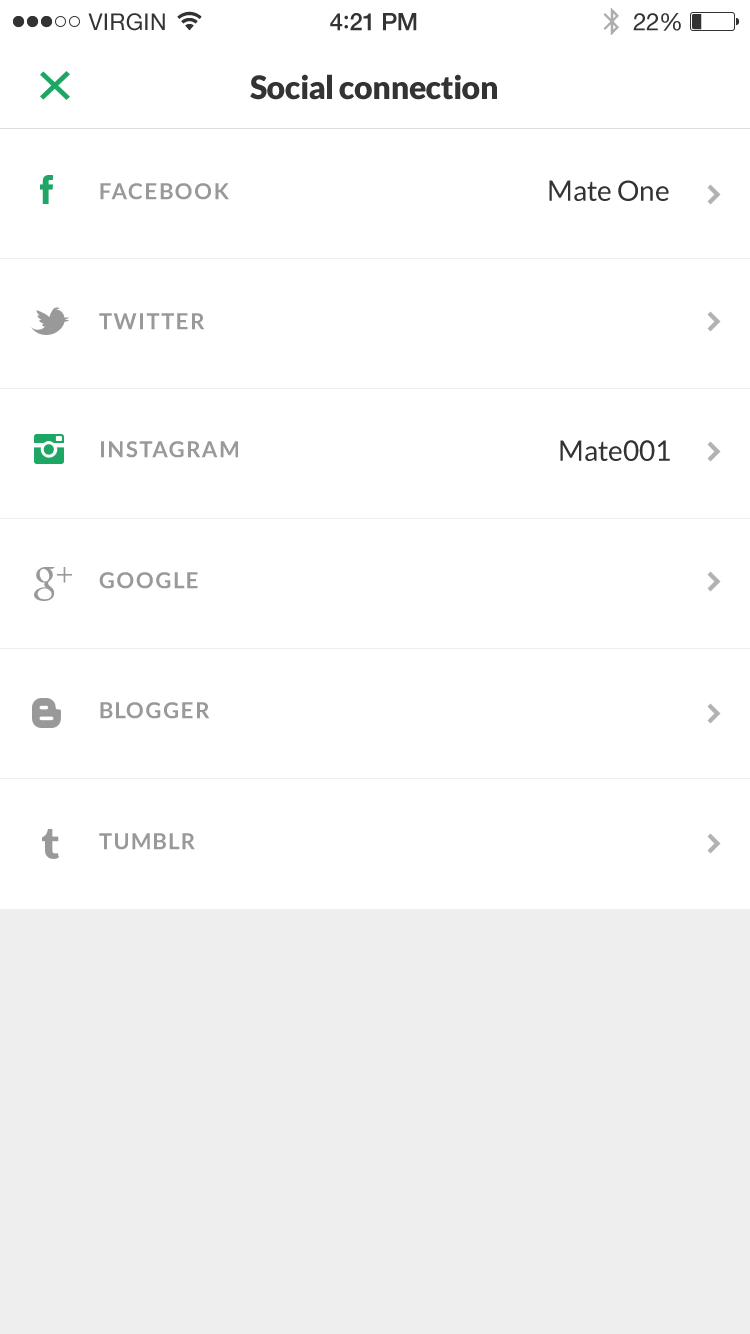
<style>
.page{position:relative;width:750px;height:1334px;background:#ffffff}
.page>*{position:absolute;margin:0}
.t1{font:32px "Lato-Black";letter-spacing:-0.02em;color:#333333}
.t2{font:22px "Lato-Bold";letter-spacing:0.07em;color:#999999}
.t3{font:28px "Lato-Regular";color:#333333}
</style>
<div class="page">
<p class="t1" style="left:250px;top:74px;width:247px;height:26px">Social connection</p>
<p class="t2" style="left:100px;top:183px;width:129px;height:17px">FACEBOOK</p>
<p class="t3" style="left:549px;top:180px;width:120px;height:21px">Mate One</p>
<p class="t2" style="left:99px;top:313px;width:106px;height:17px">TWITTER</p>
<p class="t2" style="left:101px;top:441px;width:137px;height:17px">INSTAGRAM</p>
<p class="t3" style="left:560px;top:440px;width:110px;height:21px">Mate001</p>
<p class="t2" style="left:99px;top:572px;width:99px;height:17px">GOOGLE</p>
<p class="t2" style="left:100px;top:702px;width:110px;height:17px">BLOGGER</p>
<p class="t2" style="left:99px;top:833px;width:96px;height:17px">TUMBLR</p>
</div>
